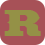
<style>
.page{position:relative;width:45px;height:45px;background:#a75157}
.page>*{position:absolute;margin:0}
.t1{font:50px "Saddlebag-Black";color:#949146}
</style>
<div class="page">
<p class="t1" style="left:4px;top:10px;width:37px;height:26px">R</p>
</div>
